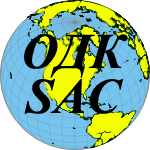
<style>
.page{position:relative;width:150px;height:150px;background:#ffffff}
.page>*{position:absolute;margin:0}
.t1{font:50px "TimesNewRomanPS-BoldItalicMT";color:#000000}
</style>
<div class="page">
<p class="t1" style="left:24px;top:34px;width:104px;height:44px">ОДК</p>
<p class="t1" style="left:24px;top:79px;width:99px;height:35px">SAC</p>
</div>
